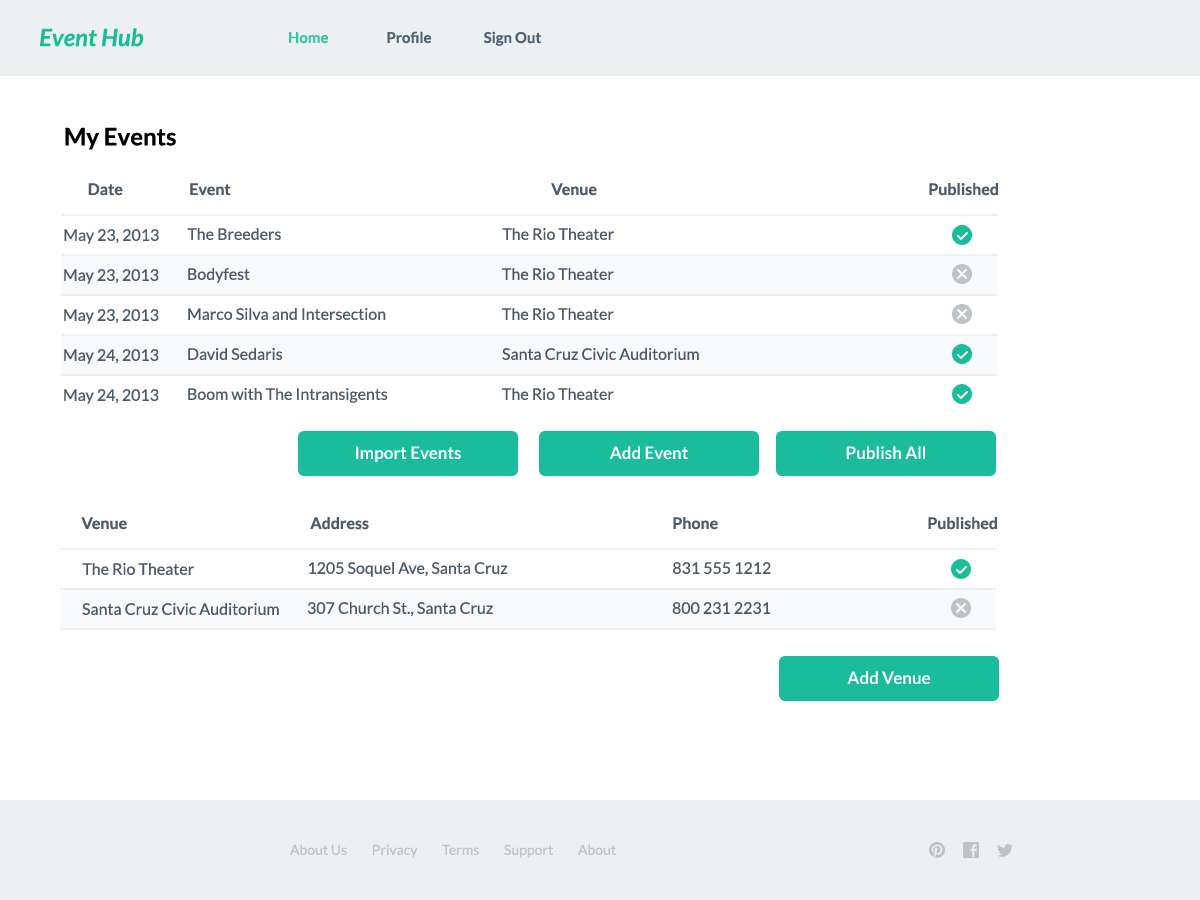
<style>
.page{position:relative;width:1200px;height:900px;background:#ffffff}
.page>*{position:absolute;margin:0}
.t1{font:24px "Lato-BoldItalic";color:#1abc9c}
.t2{font:15px "Lato-Bold"}
.t3{font:24px "Lato-Bold";color:#000000}
.t4{font:16px "Lato-Bold";color:#4b5b6a}
.t5{font:16px/40px "Lato-Regular";color:#4b5b6a}
.t6{font:17px "Lato-Bold";color:#ffffff}
.t7{font:16px/40px "Lato-Regular";color:#4b5a69}
.t8{font:14px "Lato-Regular";color:#c0c5ca}
</style>
<div class="page">
<p class="t1" style="left:40px;top:28px;width:104px;height:19px">Event Hub</p>
<p class="t2" style="left:289px;top:31px;width:252px;height:15px">Home                    Profile                  Sign Out</p>
<p class="t3" style="left:65px;top:127px;width:111px;height:23px">My Events</p>
<p class="t4" style="left:88px;top:183px;width:35px;height:13px">Date</p>
<p class="t4" style="left:190px;top:183px;width:41px;height:13px">Event</p>
<p class="t4" style="left:551px;top:183px;width:46px;height:13px">Venue</p>
<p class="t4" style="left:929px;top:183px;width:69px;height:13px">Published</p>
<p class="t5" style="left:64px;top:229px;width:95px;height:175px;text-align:center">May 23, 2013<br>May 23, 2013<br>May 23, 2013<br>May 24, 2013<br>May 24, 2013</p>
<p class="t5" style="left:187px;top:228px;width:201px;height:175px">The Breeders<br>Bodyfest<br>Marco Silva and Intersection<br>David Sedaris<br>Boom with The Intransigents</p>
<p class="t5" style="left:502px;top:228px;width:197px;height:172px">The Rio Theater<br>The Rio Theater<br>The Rio Theater<br>Santa Cruz Civic Auditorium<br>The Rio Theater</p>
<p class="t6" style="left:356px;top:446px;width:105px;height:16px">Import Events</p>
<p class="t6" style="left:609px;top:446px;width:79px;height:13px">Add Event</p>
<p class="t6" style="left:846px;top:446px;width:79px;height:13px">Publish All</p>
<p class="t4" style="left:81px;top:517px;width:46px;height:13px">Venue</p>
<p class="t4" style="left:310px;top:517px;width:59px;height:13px">Address</p>
<p class="t4" style="left:673px;top:517px;width:45px;height:13px">Phone</p>
<p class="t4" style="left:928px;top:517px;width:69px;height:13px">Published</p>
<p class="t7" style="left:82px;top:563px;width:197px;height:52px">The Rio Theater<br>Santa Cruz Civic Auditorium</p>
<p class="t5" style="left:307px;top:562px;width:201px;height:54px">1205 Soquel Ave, Santa Cruz<br>307 Church St., Santa Cruz</p>
<p class="t7" style="left:672px;top:562px;width:99px;height:52px">831 555 1212<br>800 231 2231</p>
<p class="t6" style="left:847px;top:671px;width:83px;height:13px">Add Venue</p>
<p class="t8" style="left:290px;top:844px;width:326px;height:14px">About Us         Privacy         Terms         Support         About</p>
</div>
